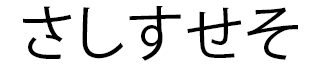
<style>
.page{position:relative;width:320px;height:64px;background:#ffffff}
.page>*{position:absolute;margin:0}
.t1{font:60px "KozGoPr6N-Regular";color:#000000}
</style>
<div class="page">
<p class="t1" style="left:23px;top:6px;width:275px;height:55px">さしすせそ</p>
</div>
